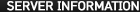
<style>
.page{position:relative;width:140px;height:12px}
.page>*{position:absolute;margin:0}
.t1{font:12.2px "HCRDotum-Bold";color:#ffffff}
</style>
<div class="page">
<p class="t1" style="left:7px;top:1px;width:132px;height:10px">SERVER INFORMATION</p>
</div>
